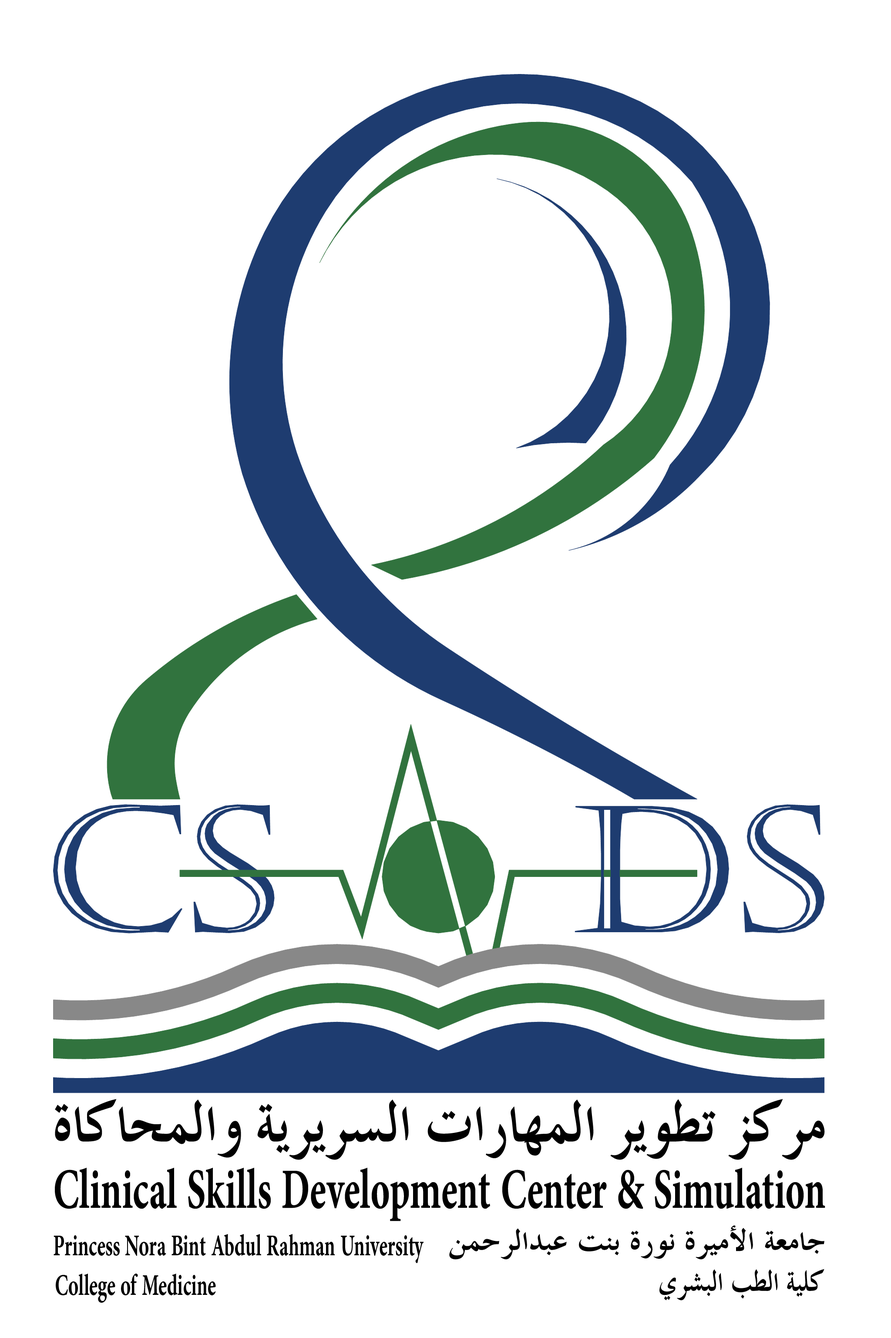
<style>
.page{position:relative;width:891px;height:1338px;background:#ffffff}
.page>*{position:absolute;margin:0}
.t1{font:70.8px "TraditionalArabic-Bold";color:#000000;scale:0.95 1}
.t2{font:79.4px "AdobeArabic-Bold";color:#000000;scale:0.64 1}
.t3{font:36.5px "TraditionalArabic-Bold";color:#000000;scale:1.07 1}
.t4{font:42.3px "AdobeArabic-Bold";color:#000000;scale:0.62 1}
.t5{font:36.5px "TraditionalArabic-Bold";color:#000000;scale:0.86 1}
</style>
<div class="page">
<p class="t1" style="left:55px;top:1099px;width:770px;height:61px">ﺓﺎﻛﺎﺤﻤﻟﺍﻭ ﺔﻳﺮﻳﺮﺴﻟﺍ ﺕﺍﺭﺎﻬﻤﻟﺍ ﺮﻳﻮﻄﺗ ﺰﻛﺮﻣ</p>
<p class="t2" style="left:55px;top:1168px;width:770px;height:53px">Clinical Skills Development Center &amp; Simulation</p>
<p class="t3" style="left:449px;top:1225px;width:376px;height:35px">ﻦﻤﺣﺮﻟﺍﺪﺒﻋ ﺖﻨﺑ ﺓﺭﻮﻧ ﺓﺮﻴﻣﻷﺍ ﺔﻌﻣﺎﺟ</p>
<p class="t4" style="left:54px;top:1234px;width:370px;height:29px">Princess Nora Bint Abdul Rahman University</p>
<p class="t4" style="left:56px;top:1274px;width:160px;height:29px">College of Medicine</p>
<p class="t5" style="left:660px;top:1269px;width:165px;height:32px">ﻱﺮﺸﺒﻟﺍ ﺐﻄﻟﺍ ﺔﻴﻠﻛ</p>
</div>
